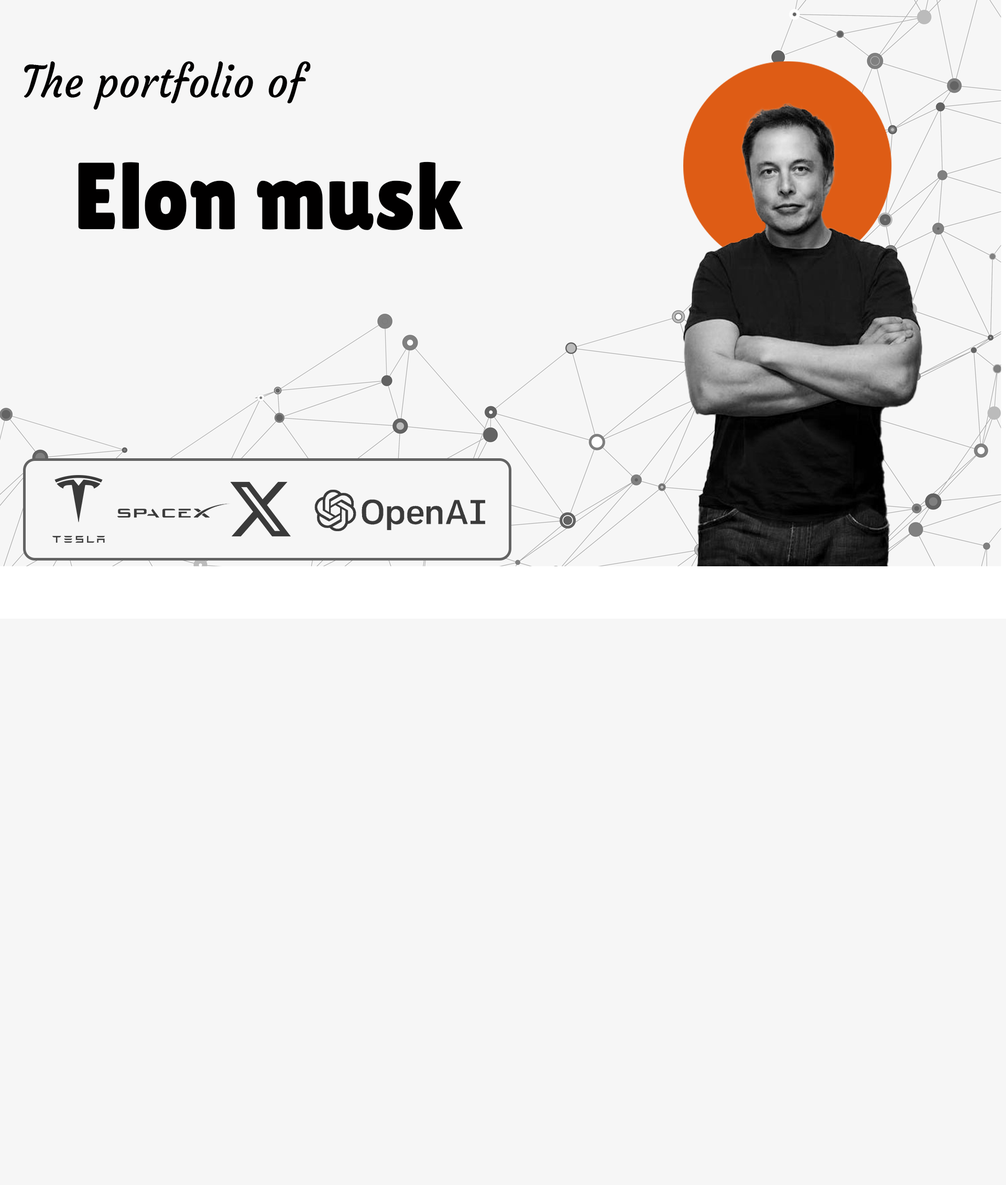
<style>
.page{position:relative;width:1006px;height:1185px;background:#f6f6f6}
.page>*{position:absolute;margin:0}
.t1{font:43.6px "Courgette-Regular";color:#010000;scale:0.95 1}
.t2{font:94.8px "LilitaOne";color:#010000;scale:0.95 1}
</style>
<div class="page">
<p class="t1" style="left:24px;top:61px;width:287px;height:49px">The portfolio of</p>
<p class="t2" style="left:78px;top:161px;width:385px;height:69px">Elon musk</p>
</div>
